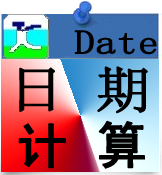
<style>
.page{position:relative;width:162px;height:175px}
.page>*{position:absolute;margin:0}
.t1{font:33.7px "SimSun";color:#000000;font-weight:bold;scale:1.2 1}
.t2{font:50px "SimSun";color:#000000;font-weight:bold;scale:1.11 1}
.t3{font:50px "SimHei";color:#000000;font-weight:bold}
</style>
<div class="page">
<p class="t1" style="left:74px;top:30px;width:83px;height:25px">Date</p>
<p class="t2" style="left:19px;top:66px;width:129px;height:48px">日 期</p>
<p class="t3" style="left:18px;top:120px;width:127px;height:49px">计 算</p>
</div>
